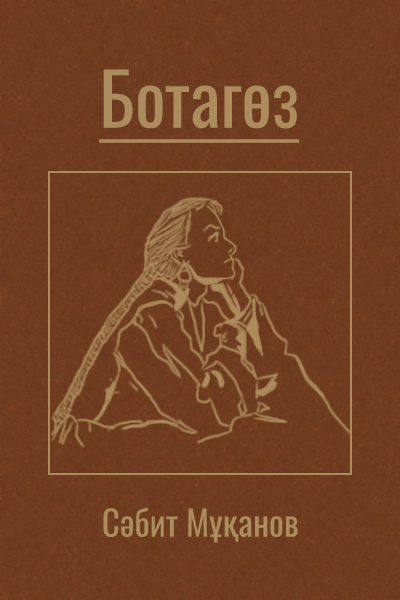
<style>
.page{position:relative;width:400px;height:600px}
.page>*{position:absolute;margin:0}
.t1{font:72px "Oswald-Regular";color:#ac8c5c;text-decoration:underline}
.t2{font:35px "Oswald-Regular";color:#ac8c5c}
</style>
<div class="page">
<p class="t1" style="left:99px;top:69px;width:200px;height:74px">Ботагөз</p>
<p class="t2" style="left:103px;top:507px;width:195px;height:36px">Сәбит Мұқанов</p>
</div>
